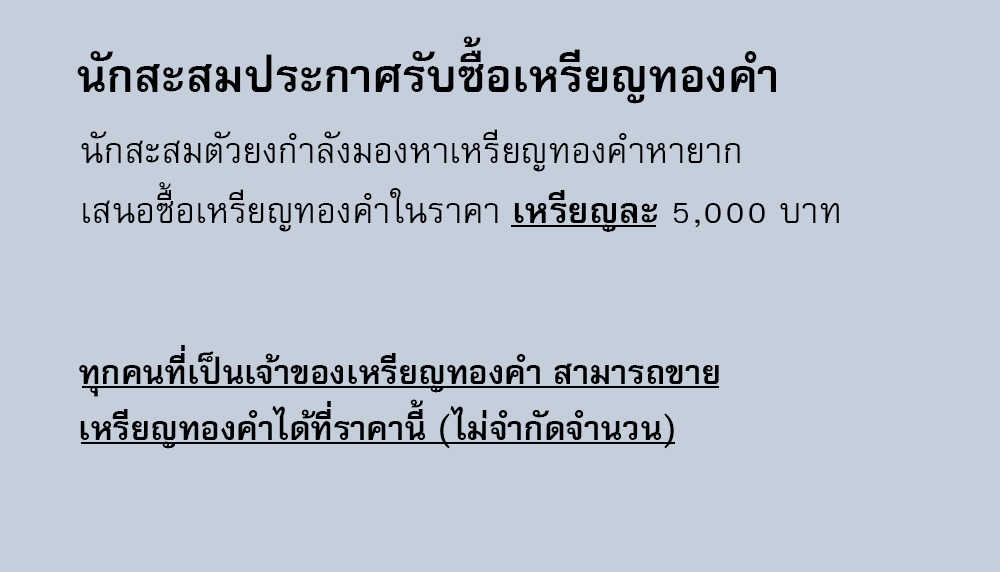
<style>
.page{position:relative;width:1000px;height:572px;background:#c5cedb}
.page>*{position:absolute;margin:0}
.t1{font:64px "FreesiaUPCBold";color:#000000}
.t2{font:50px/60px "FreesiaUPC";color:#000000}
.t3{font:50px/60px "FreesiaUPCBold";color:#000000}
.t4{font:47px "FreesiaUPCBold";color:#000000}
</style>
<div class="page">
<p class="t1" style="left:77px;top:36px;width:699px;height:68px">นักสะสมประกาศรับซื้อเหรียญทองคำ</p>
<p class="t2" style="left:81px;top:129px;width:758px;height:103px">นักสะสมตัวยงกำลังมองหาเหรียญทองคำหายาก<br>เสนอซื้อเหรียญทองคำในราคา <span class="t3">เหรียญละ </span>5,000 บาท</p>
<p class="t4" style="left:79px;top:345px;width:640px;height:104px">ทุกคนที่เป็นเจ้าของเหรียญทองคำ สามารถขาย<br>เหรียญทองคำได้ที่ราคานี้ (ไม่จำกัดจำนวน)</p>
</div>
